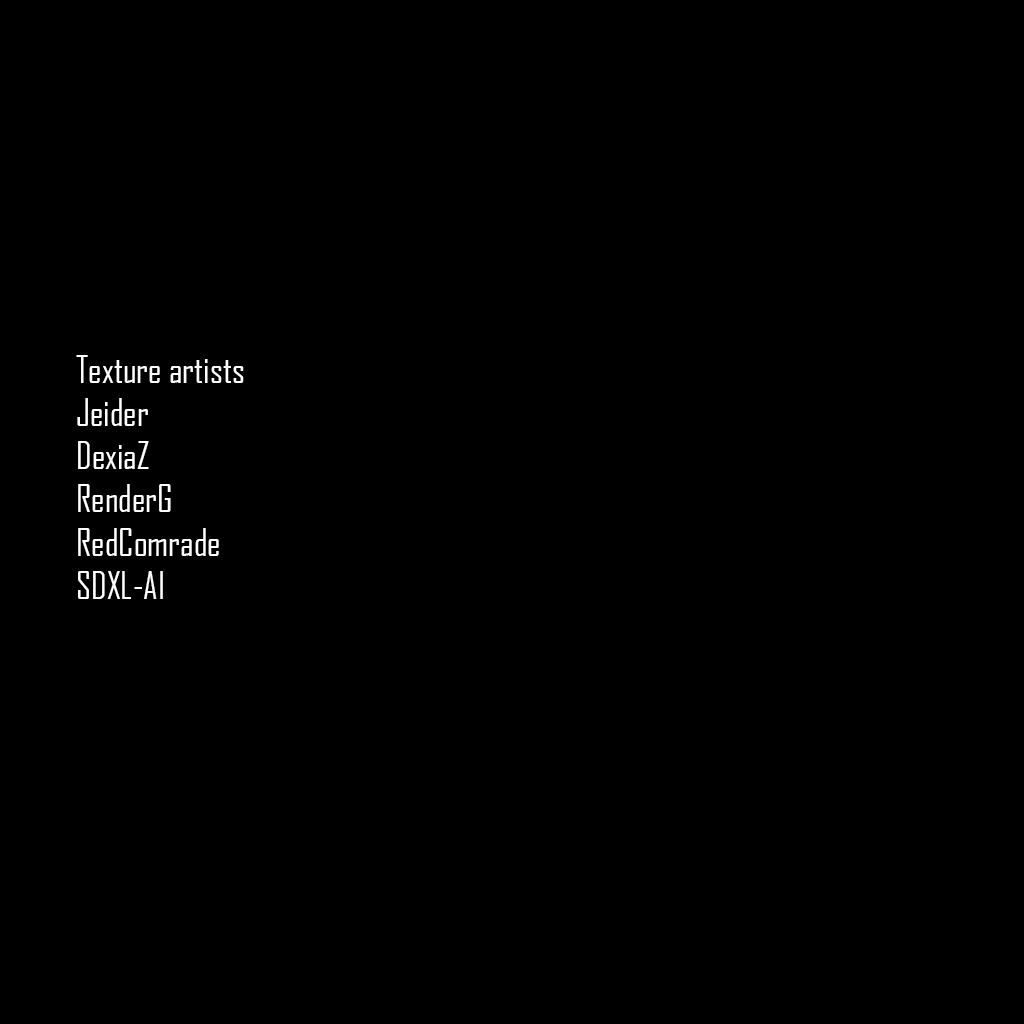
<style>
.page{position:relative;width:1024px;height:1024px;background:#000000}
.page>*{position:absolute;margin:0}
.t1{font:36px "AgencyFBCyrillic";color:#ffffff}
</style>
<div class="page">
<p class="t1" style="left:76px;top:355px;width:168px;height:244px">Texture artists<br>Jeider<br>DexiaZ<br>RenderG<br>RedComrade<br>SDXL-AI</p>
</div>
